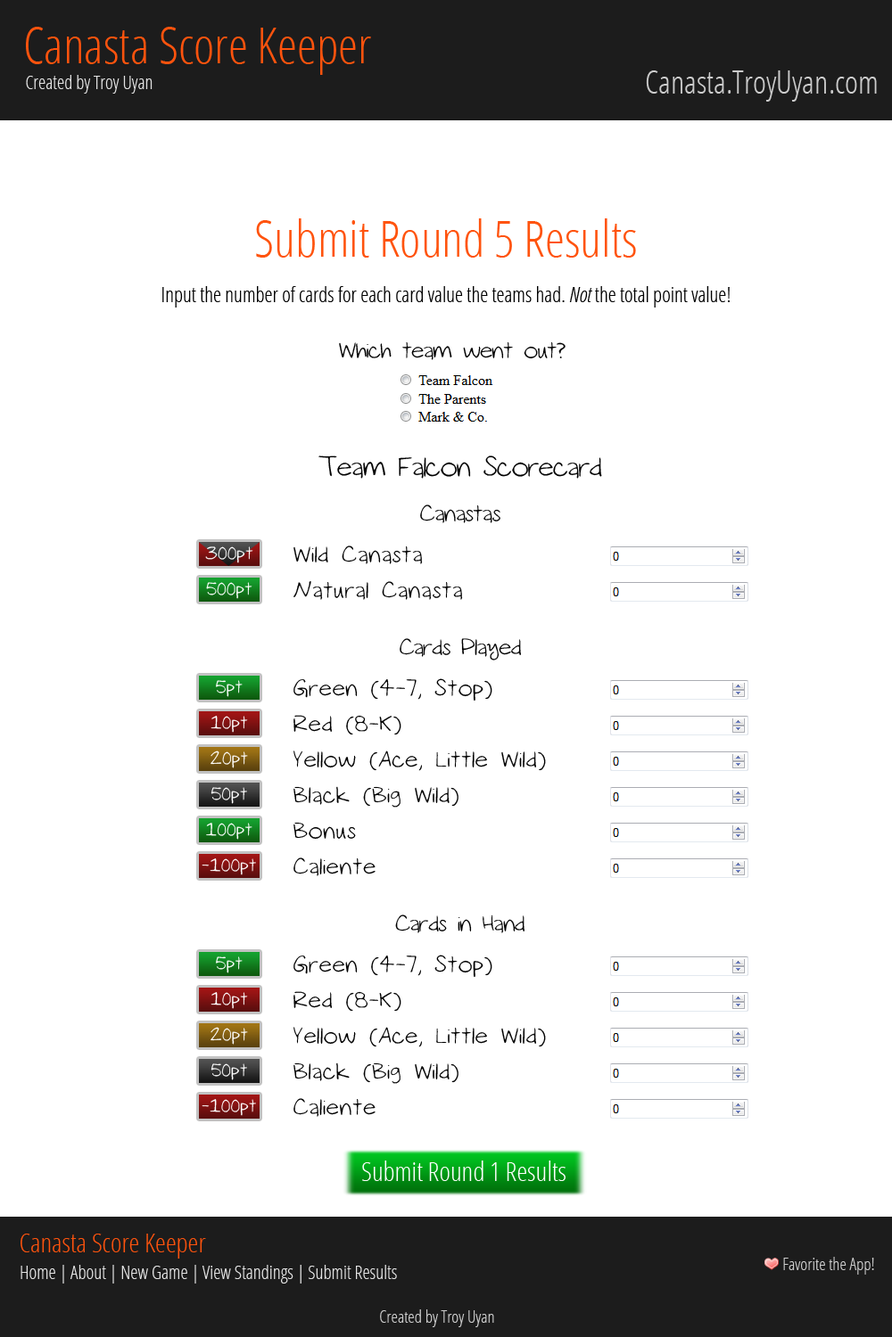
<style>
.page{position:relative;width:892px;height:1337px;background:#ffffff}
.page>*{position:absolute;margin:0}
.t1{font:49.9px "OpenSans-CondensedLight";color:#ff530d}
.t2{font:18.7px "OpenSans-CondensedLight";color:#e4e4e4}
.t3{font:32.1px "OpenSans-CondensedLight";color:#cccccc}
.t4{font:20.5px "OpenSans-CondensedLight";color:#000000}
.t5{font:20.5px "OpenSans-CondensedLightItalic";color:#000000}
.t6{font:26.7px "Sketch";color:#000000}
.t7{font:32.1px "Sketch";color:#000000}
.t8{font:26.7px "Sketch";letter-spacing:0.05em;color:#000000}
.t9{font:20.5px "Sketch";letter-spacing:0.05em;color:#ffffff}
.t10{font:26.7px "OpenSans-CondensedLight";color:#ffffff}
.t11{font:26.7px "OpenSans-CondensedLight";color:#ff530d}
.t12{font:16.9px "OpenSans-CondensedLight";color:#cccccc}
</style>
<div class="page">
<p class="t1" style="left:26px;top:27px;width:345px;height:48px">Canasta Score Keeper</p>
<p class="t2" style="left:26px;top:75px;width:126px;height:19px">Created by Troy Uyan</p>
<p class="t3" style="left:646px;top:70px;width:230px;height:32px">Canasta.TroyUyan.com</p>
<p class="t1" style="left:256px;top:218px;width:380px;height:40px">Submit Round 5 Results</p>
<p class="t4" style="left:162px;top:286px;width:567px;height:22px">Input the number of cards for each card value the teams had. <span class="t5">Not</span> the total point value!</p>
<p class="t6" style="left:339px;top:342px;width:226px;height:18px">Which team went out?</p>
<p class="t7" style="left:318px;top:456px;width:284px;height:23px">Team Falcon Scorecard</p>
<p class="t6" style="left:420px;top:505px;width:80px;height:18px">Canastas</p>
<p class="t8" style="left:293px;top:546px;width:130px;height:18px">Wild Canasta</p>
<p class="t9" style="left:205px;top:547px;width:48px;height:16px">300pt</p>
<p class="t8" style="left:293px;top:581px;width:170px;height:19px">Natural Canasta</p>
<p class="t9" style="left:206px;top:582px;width:46px;height:17px">500pt</p>
<p class="t6" style="left:399px;top:638px;width:122px;height:23px">Cards Played</p>
<p class="t9" style="left:216px;top:680px;width:27px;height:17px">5pt</p>
<p class="t8" style="left:293px;top:679px;width:199px;height:22px">Green (4-7, Stop)</p>
<p class="t9" style="left:210px;top:716px;width:38px;height:17px">10pt</p>
<p class="t8" style="left:293px;top:715px;width:108px;height:21px">Red (8-K)</p>
<p class="t9" style="left:210px;top:751px;width:38px;height:18px">20pt</p>
<p class="t8" style="left:293px;top:751px;width:253px;height:20px">Yellow (Ace, Little Wild)</p>
<p class="t9" style="left:210px;top:787px;width:37px;height:17px">50pt</p>
<p class="t8" style="left:293px;top:786px;width:165px;height:22px">Black (Big Wild)</p>
<p class="t9" style="left:206px;top:823px;width:46px;height:17px">100pt</p>
<p class="t8" style="left:293px;top:822px;width:63px;height:18px">Bonus</p>
<p class="t8" style="left:293px;top:858px;width:82px;height:18px">Caliente</p>
<p class="t9" style="left:202px;top:859px;width:54px;height:17px">-100pt</p>
<p class="t6" style="left:395px;top:915px;width:129px;height:19px">Cards in Hand</p>
<p class="t9" style="left:216px;top:957px;width:27px;height:17px">5pt</p>
<p class="t8" style="left:293px;top:955px;width:199px;height:22px">Green (4-7, Stop)</p>
<p class="t9" style="left:210px;top:992px;width:38px;height:17px">10pt</p>
<p class="t8" style="left:293px;top:991px;width:108px;height:21px">Red (8-K)</p>
<p class="t9" style="left:210px;top:1027px;width:38px;height:18px">20pt</p>
<p class="t8" style="left:293px;top:1027px;width:253px;height:21px">Yellow (Ace, Little Wild)</p>
<p class="t9" style="left:210px;top:1064px;width:37px;height:17px">50pt</p>
<p class="t8" style="left:293px;top:1063px;width:165px;height:21px">Black (Big Wild)</p>
<p class="t9" style="left:202px;top:1099px;width:54px;height:17px">-100pt</p>
<p class="t8" style="left:293px;top:1098px;width:82px;height:19px">Caliente</p>
<p class="t10" style="left:362px;top:1161px;width:203px;height:20px">Submit Round 1 Results</p>
<p class="t11" style="left:21px;top:1234px;width:185px;height:25px">Canasta Score Keeper</p>
<p class="t2" style="left:21px;top:1265px;width:376px;height:19px">Home | About | New Game | View Standings | Submit Results</p>
<p class="t12" style="left:783px;top:1257px;width:91px;height:18px">Favorite the App!</p>
<p class="t12" style="left:380px;top:1310px;width:114px;height:18px">Created by Troy Uyan</p>
</div>
